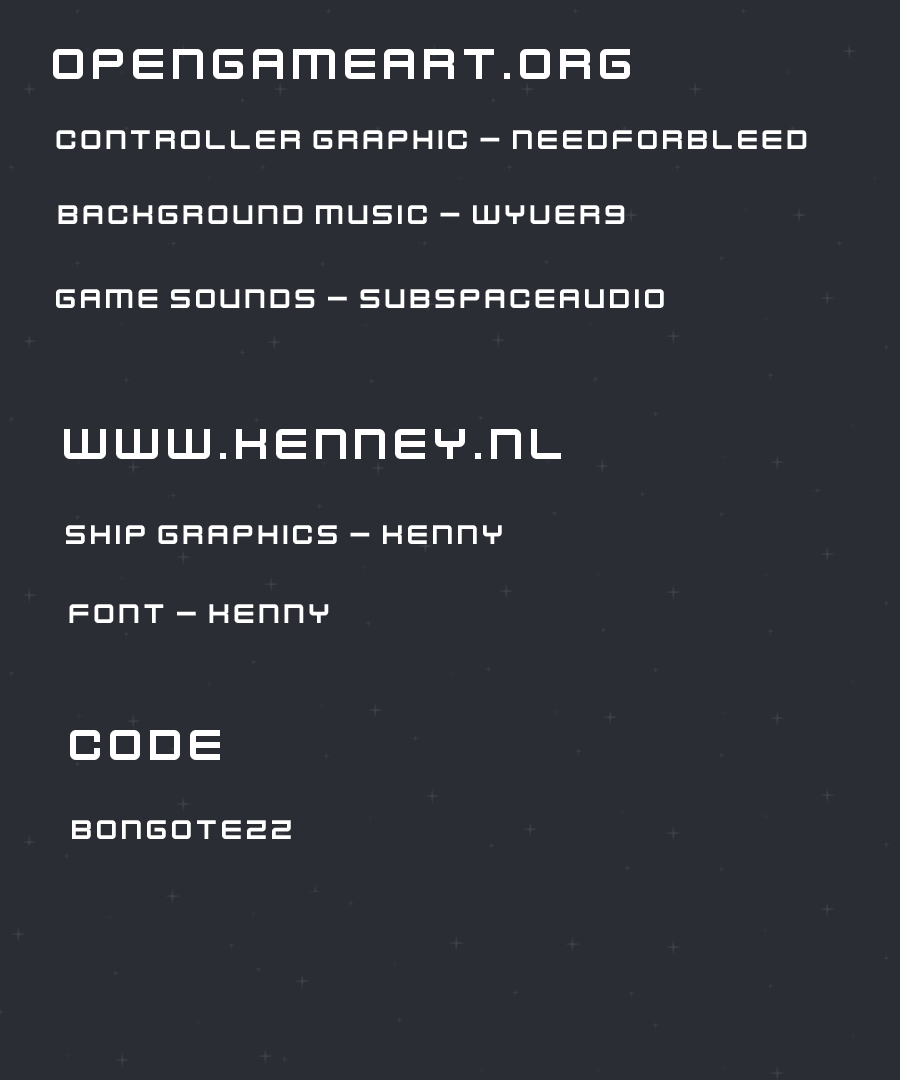
<style>
.page{position:relative;width:900px;height:1080px;background:#2a2d33}
.page>*{position:absolute;margin:0}
.t1{font:48px "KenVector-Future";color:#ffffff}
.t2{font:30px "KenVector-Future";color:#ffffff}
</style>
<div class="page">
<p class="t1" style="left:53px;top:49px;width:577px;height:30px">opengameart.org</p>
<p class="t2" style="left:56px;top:130px;width:751px;height:19px">Controller graphic - needforbleed</p>
<p class="t2" style="left:58px;top:205px;width:567px;height:19px">background music - wyver9</p>
<p class="t2" style="left:56px;top:289px;width:608px;height:19px">game sounds - SubspaceAudio</p>
<p class="t1" style="left:64px;top:429px;width:497px;height:30px">www.kenney.nl</p>
<p class="t2" style="left:66px;top:525px;width:436px;height:19px">ship graphics - Kenny</p>
<p class="t2" style="left:69px;top:604px;width:260px;height:19px">Font - Kenny</p>
<p class="t1" style="left:70px;top:730px;width:150px;height:30px">code</p>
<p class="t2" style="left:72px;top:820px;width:219px;height:19px">bongotezz</p>
</div>
